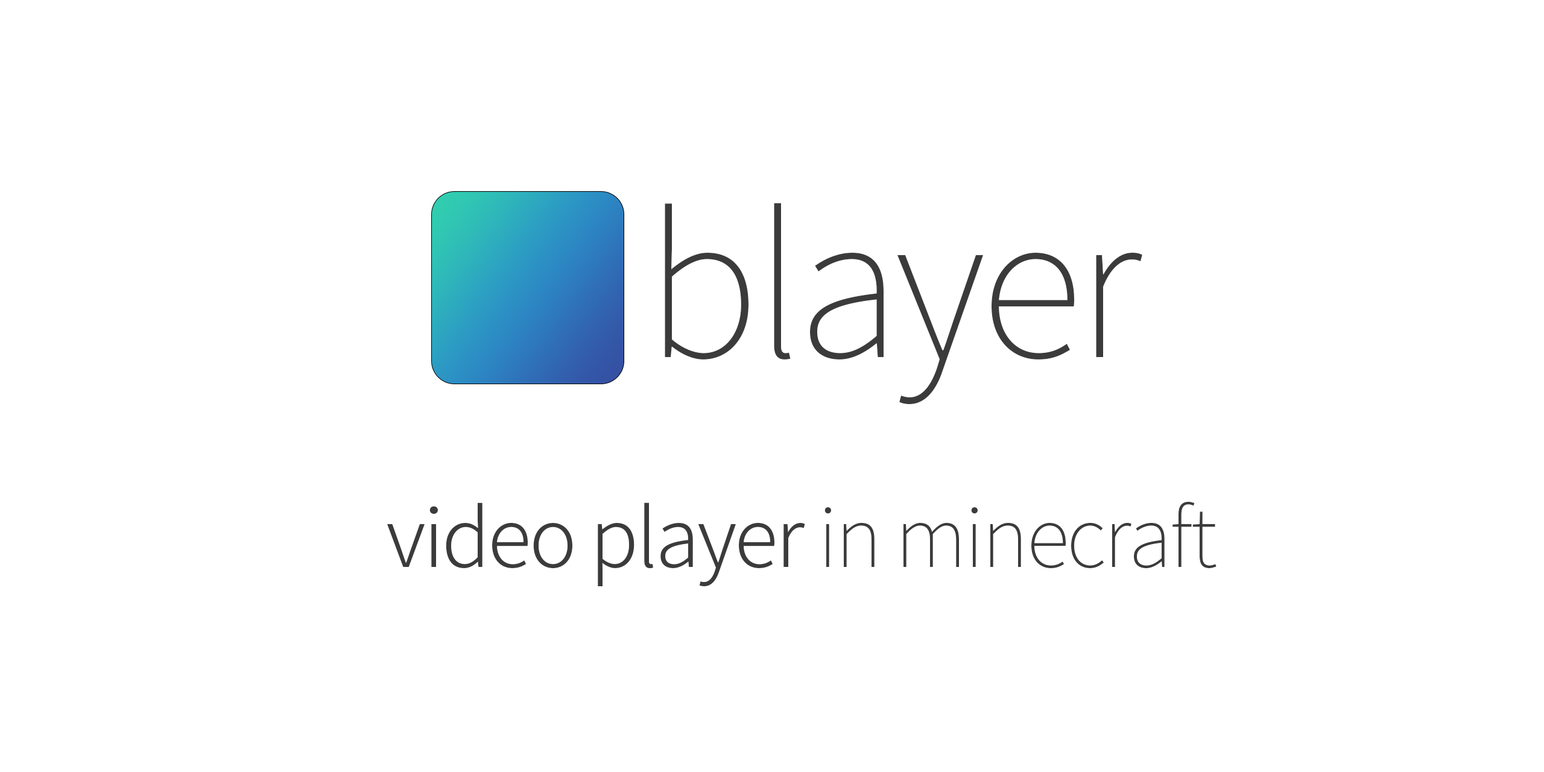
<style>
.page{position:relative;width:1544px;height:772px;background:#ffffff}
.page>*{position:absolute;margin:0}
.t1{font:193.6px "NotoSansCJKkr-Thin";letter-spacing:-0.03em;color:#3b3b3b}
.t2{font:80.8px "NotoSansCJKkr-Light";letter-spacing:-0.03em;color:#3b3b3b}
.t3{font:80.8px "NotoSansCJKkr-Thin";letter-spacing:-0.03em;color:#3b3b3b}
</style>
<div class="page">
<p class="t1" style="left:665px;top:203px;width:478px;height:201px">blayer</p>
<p class="t2" style="left:387px;top:502px;width:830px;height:85px">video player <span class="t3">in minecraft</span></p>
</div>
